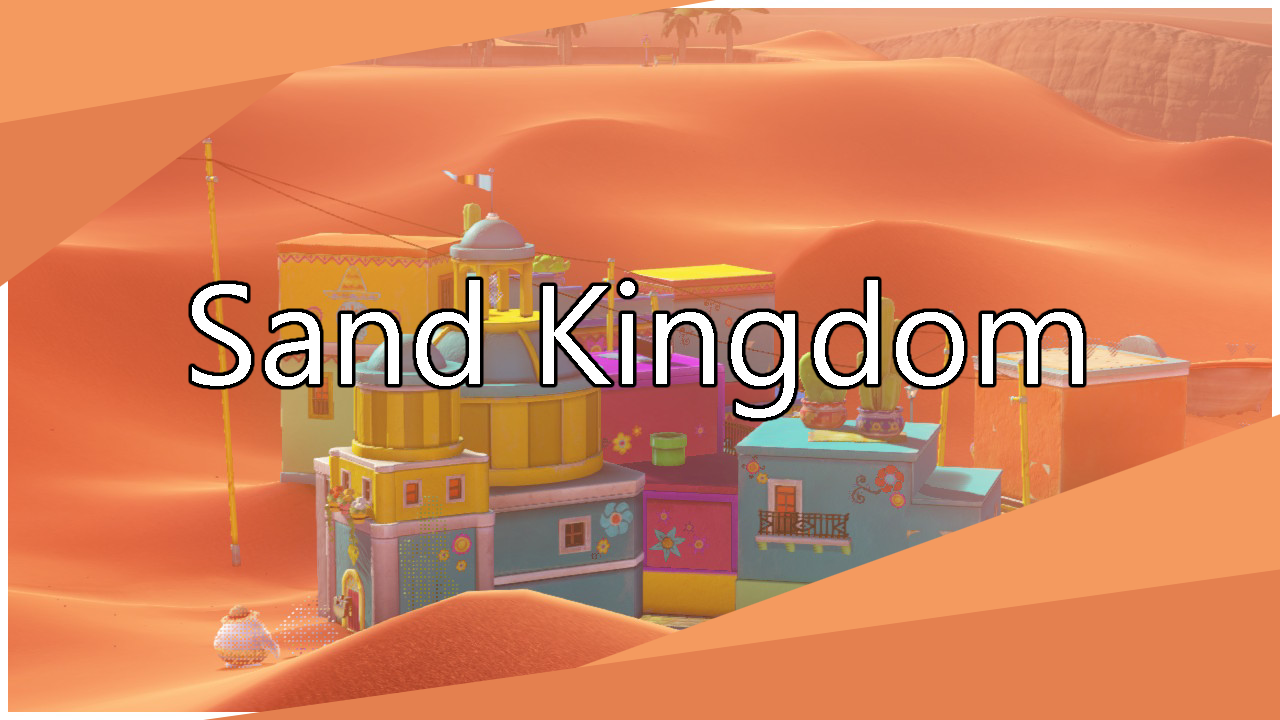
<style>
.page{position:relative;width:1280px;height:720px}
.page>*{position:absolute;margin:0}
.t1{font:140px "SegoeUI";color:#ffffff}
</style>
<div class="page">
<p class="t1" style="left:192px;top:280px;width:891px;height:138px">Sand Kingdom</p>
</div>
